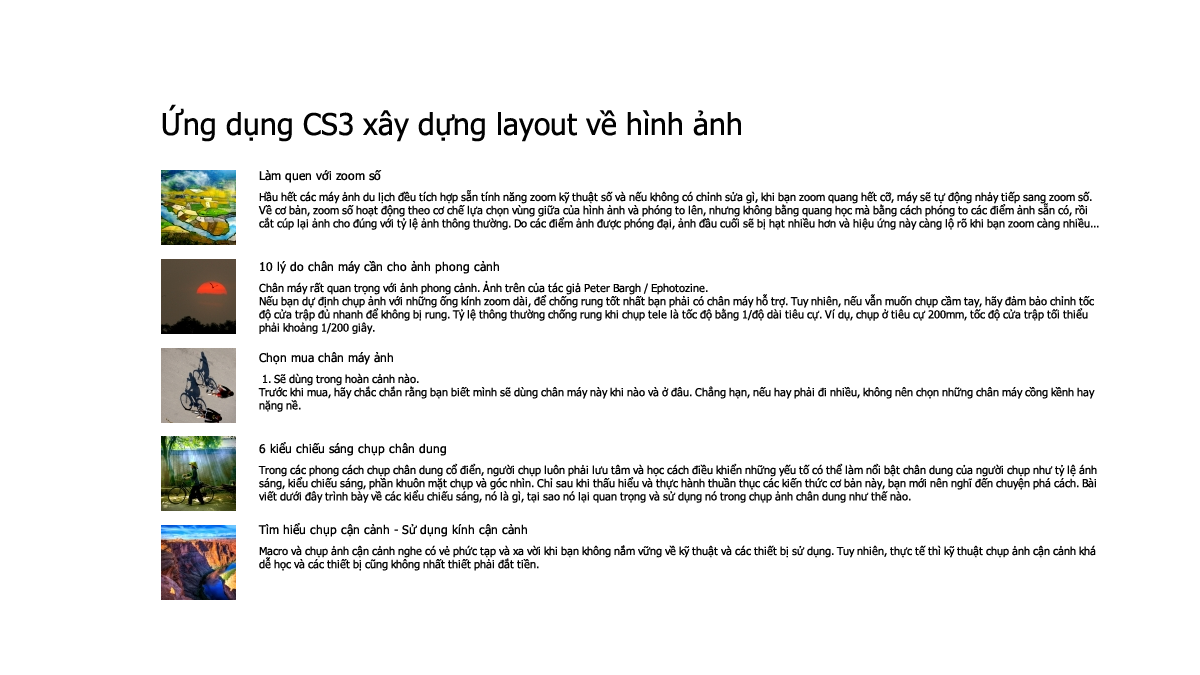
<style>
.page{position:relative;width:1200px;height:675px;background:#ffffff}
.page>*{position:absolute;margin:0}
.t1{font:30px "Tahoma";color:#010101}
.t2{font:12px "Tahoma";color:#010101}
.t3{font:11px "Tahoma";color:#010101}
</style>
<div class="page">
<p class="t1" style="left:162px;top:104px;width:579px;height:38px">Ứng dụng CS3 xây dựng layout về hình ảnh</p>
<p class="t2" style="left:259px;top:170px;width:123px;height:13px">Làm quen với zoom số</p>
<p class="t3" style="left:258px;top:190px;width:841px;height:40px">Hầu hết các máy ảnh du lịch đều tích hợp sẵn tính năng zoom kỹ thuật số và nếu không có chỉnh sửa gì, khi bạn zoom quang hết cỡ, máy sẽ tự động nhảy tiếp sang zoom số.<br>Về cơ bản, zoom số hoạt động theo cơ chế lựa chọn vùng giữa của hình ảnh và phóng to lên, nhưng không bằng quang học mà bằng cách phóng to các điểm ảnh sẵn có, rồi <br>cắt cúp lại ảnh cho đúng với tỷ lệ ảnh thông thường. Do các điểm ảnh được phóng đại, ảnh đầu cuối sẽ bị hạt nhiều hơn và hiệu ứng này càng lộ rõ khi bạn zoom càng nhiều...</p>
<p class="t2" style="left:260px;top:261px;width:239px;height:13px">10 lý do chân máy cần cho ảnh phong cảnh</p>
<p class="t3" style="left:259px;top:280px;width:835px;height:54px">Chân máy rất quan trọng với ảnh phong cảnh. Ảnh trên của tác giả Peter Bargh / Ephotozine.<br>Nếu bạn dự định chụp ảnh với những ống kính zoom dài, để chống rung tốt nhất bạn phải có chân máy hỗ trợ. Tuy nhiên, nếu vẫn muốn chụp cầm tay, hãy đảm bảo chỉnh tốc <br>độ cửa trập đủ nhanh để không bị rung. Tỷ lệ thông thường chống rung khi chụp tele là tốc độ bằng 1/độ dài tiêu cự. Ví dụ, chụp ở tiêu cự 200mm, tốc độ cửa trập tối thiểu <br>phải khoảng 1/200 giây.</p>
<p class="t2" style="left:259px;top:352px;width:134px;height:13px">Chọn mua chân máy ảnh</p>
<p class="t3" style="left:258px;top:373px;width:837px;height:39px">1. Sẽ dùng trong hoàn cảnh nào.<br>Trước khi mua, hãy chắc chắn rằng bạn biết mình sẽ dùng chân máy này khi nào và ở đâu. Chẳng hạn, nếu hay phải đi nhiều, không nên chọn những chân máy cồng kềnh hay <br>nặng nề.</p>
<p class="t2" style="left:259px;top:442px;width:187px;height:14px">6 kiểu chiếu sáng chụp chân dung</p>
<p class="t3" style="left:258px;top:463px;width:839px;height:40px">Trong các phong cách chụp chân dung cổ điển, người chụp luôn phải lưu tâm và học cách điều khiển những yếu tố có thể làm nổi bật chân dung của người chụp như tỷ lệ ánh <br>sáng, kiểu chiếu sáng, phần khuôn mặt chụp và góc nhìn. Chỉ sau khi thấu hiểu và thực hành thuần thục các kiến thức cơ bản này, bạn mới nên nghĩ đến chuyện phá cách. Bài <br>viết dưới đây trình bày về các kiểu chiếu sáng, nó là gì, tại sao nó lại quan trọng và sử dụng nó trong chụp ảnh chân dung như thế nào.</p>
<p class="t2" style="left:258px;top:523px;width:269px;height:14px">Tìm hiểu chụp cận cảnh - Sử dụng kính cận cảnh</p>
<p class="t3" style="left:259px;top:545px;width:837px;height:26px">Macro và chụp ảnh cận cảnh nghe có vẻ phức tạp và xa vời khi bạn không nắm vững về kỹ thuật và các thiết bị sử dụng. Tuy nhiên, thực tế thì kỹ thuật chụp ảnh cận cảnh khá <br>dễ học và các thiết bị cũng không nhất thiết phải đắt tiền.</p>
</div>
